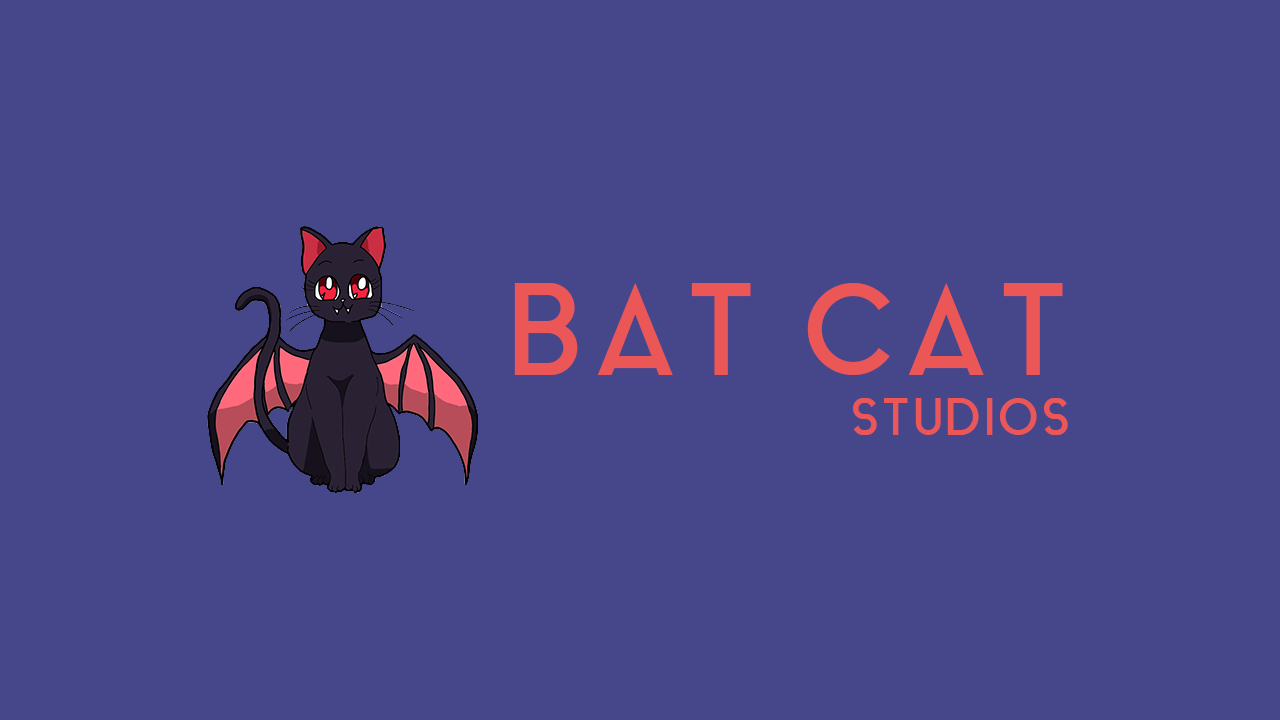
<style>
.page{position:relative;width:1280px;height:720px;background:#46468b}
.page>*{position:absolute;margin:0}
.t1{font:125px "AquaGrotesque";color:#eb5656}
.t2{font:50px "AquaGrotesque";color:#eb5656}
</style>
<div class="page">
<p class="t1" style="left:514px;top:283px;width:554px;height:152px;text-align:right">BAT CAT<br><span class="t2">STUDIOS</span></p>
</div>
